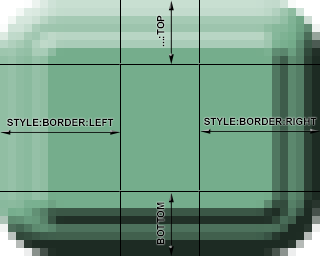
<style>
.page{position:relative;width:320px;height:256px;background:#75ad8c}
.page>*{position:absolute;margin:0}
.t1{font:10px "Arial-BoldMT";color:#000000}
</style>
<div class="page">
<p class="t1" style="left:157px;top:15px;width:8px;height:32px;rotate:-90deg">...:TOP</p>
<p class="t1" style="left:7px;top:118px;width:107px;height:8px">STYLE:BORDER:LEFT</p>
<p class="t1" style="left:204px;top:117px;width:113px;height:8px">STYLE:BORDER:RIGHT</p>
<p class="t1" style="left:157px;top:202px;width:8px;height:43px;rotate:-90deg">BOTTOM</p>
</div>
